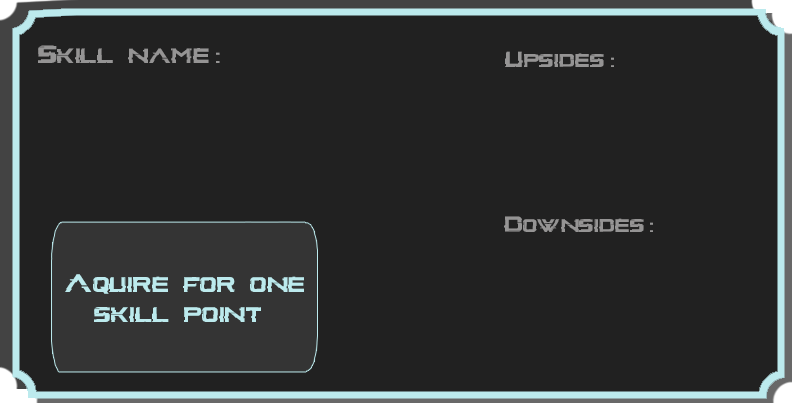
<style>
.page{position:relative;width:792px;height:403px;background:#212121}
.page>*{position:absolute;margin:0}
.t1{font:24.3px "GlitchInside";color:#959494}
.t2{font:21.8px "GlitchInside";color:#959494}
.t3{font:21.7px "GlitchInside";color:#959494}
.t4{font:25px "GlitchInside";color:#bceaed}
</style>
<div class="page">
<p class="t1" style="left:38px;top:45px;width:182px;height:18px">Skill  name :</p>
<p class="t2" style="left:505px;top:51px;width:109px;height:16px">Upsides :</p>
<p class="t3" style="left:504px;top:216px;width:149px;height:16px">Downsides :</p>
<p class="t4" style="left:65px;top:274px;width:239px;height:48px">Aquire  for  one<br>    skill  point</p>
</div>
